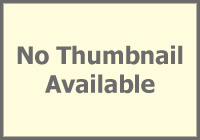
<style>
.page{position:relative;width:200px;height:140px;background:#fefcdd}
.page>*{position:absolute;margin:0}
.t1{font:24px "Tahoma-Bold";color:#6c6c6c}
</style>
<div class="page">
<p class="t1" style="left:17px;top:45px;width:166px;height:49px;text-align:center">No Thumbnail<br>Available</p>
</div>
